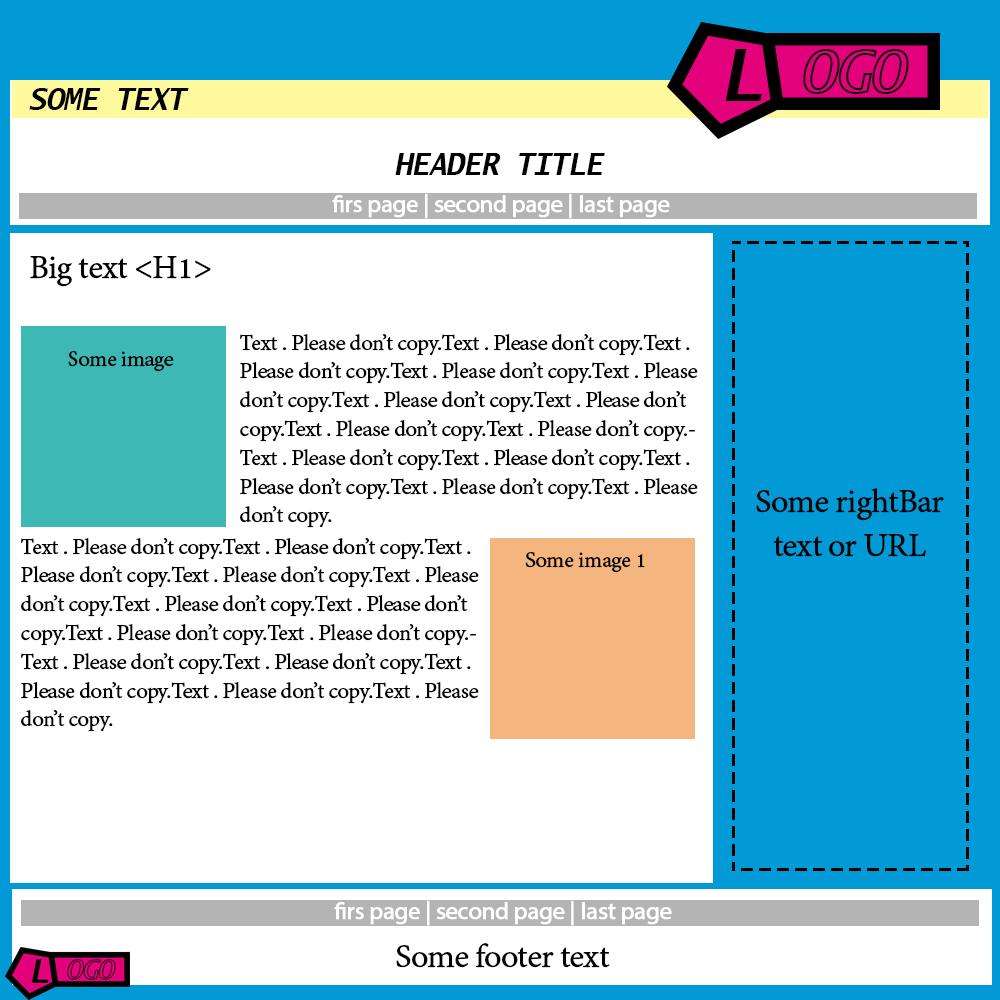
<style>
.page{position:relative;width:1000px;height:1000px;background:#ffffff}
.page>*{position:absolute;margin:0}
.t1{font:72px "LucidaSans-TypewriterBoldOblique";letter-spacing:-0.025em;color:#020202;text-transform:uppercase}
.t2{font:60px "LucidaSans-TypewriterBoldOblique";letter-spacing:-0.025em;text-transform:uppercase}
.t3{font:30px "LucidaSans-TypewriterBoldOblique";letter-spacing:-0.025em;color:#020202;text-transform:uppercase}
.t4{font:24px "MyriadPro-Regular";letter-spacing:-0.025em;color:#ffffff;font-weight:bold}
.t5{font:36px "AdobeDevanagari-Regular";letter-spacing:-0.025em;color:#020202;font-weight:bold}
.t6{font:24px "AdobeDevanagari-Regular";letter-spacing:-0.025em;color:#020202;font-weight:bold}
</style>
<div class="page">
<p class="t1" style="left:725px;top:49px;width:37px;height:52px">L</p>
<p class="t2" style="left:803px;top:49px;width:106px;height:45px">ogo</p>
<p class="t3" style="left:29px;top:88px;width:160px;height:22px">some text</p>
<p class="t3" style="left:395px;top:153px;width:210px;height:22px">Header Title</p>
<p class="t4" style="left:332px;top:193px;width:338px;height:26px">firs page | second page | last page</p>
<p class="t5" style="left:30px;top:256px;width:181px;height:31px">Big text &lt;H1&gt;</p>
<p class="t6" style="left:240px;top:334px;width:458px;height:194px">Text . Please don’t copy.Text . Please don’t copy.Text . Please don’t copy.Text . Please don’t copy.Text . Please don’t copy.Text . Please don’t copy.Text . Please don’t copy.Text . Please don’t copy.Text . Please don’t copy.Text . Please don’t copy.Text . Please don’t copy.Text . Please don’t copy.Text . Please don’t copy.Text . Please don’t copy.</p>
<p class="t6" style="left:68px;top:351px;width:106px;height:21px">Some image</p>
<p class="t5" style="left:756px;top:488px;width:188px;height:69px;text-align:center">Some rightBar<br>text or URL</p>
<p class="t6" style="left:21px;top:538px;width:458px;height:194px">Text . Please don’t copy.Text . Please don’t copy.Text . Please don’t copy.Text . Please don’t copy.Text . Please don’t copy.Text . Please don’t copy.Text . Please don’t copy.Text . Please don’t copy.Text . Please don’t copy.Text . Please don’t copy.Text . Please don’t copy.Text . Please don’t copy.Text . Please don’t copy.Text . Please don’t copy.</p>
<p class="t6" style="left:525px;top:552px;width:120px;height:21px">Some image 1</p>
<p class="t4" style="left:334px;top:900px;width:338px;height:26px">firs page | second page | last page</p>
<p class="t5" style="left:396px;top:943px;width:214px;height:25px">Some footer text</p>
</div>
